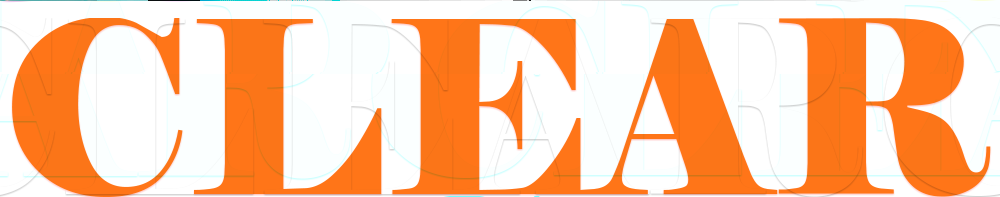
<style>
.page{position:relative;width:1000px;height:197px;background:#ffffff}
.page>*{position:absolute;margin:0}
.t1{font:239.8px "Elephant-Regular";color:#fb7518}
</style>
<div class="page">
<p class="t1" style="left:12px;top:0px;width:979px;height:179px">CLEAR</p>
</div>
